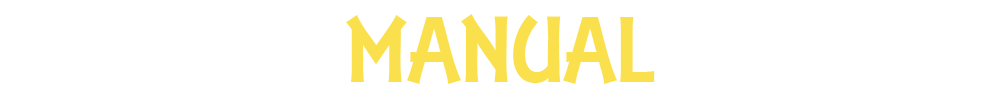
<style>
.page{position:relative;width:1000px;height:100px;background:#ffffff}
.page>*{position:absolute;margin:0}
.t1{font:100px "ARESSENCE";color:#fbe04e}
</style>
<div class="page">
<p class="t1" style="left:346px;top:14px;width:309px;height:70px">MANUAL</p>
</div>
